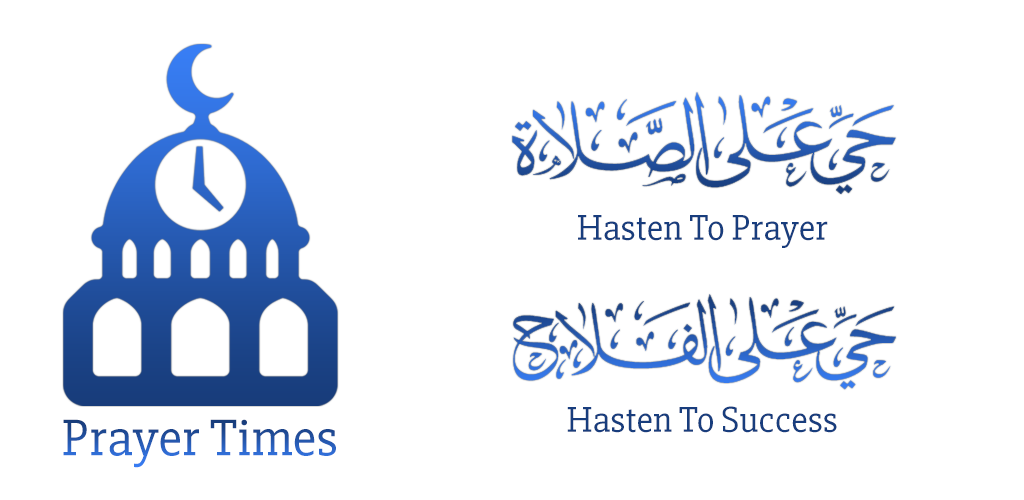
<style>
.page{position:relative;width:1024px;height:500px;background:#ffffff}
.page>*{position:absolute;margin:0}
.t1{font:37px "Slabo27px-Regular";color:#183d7d}
.t2{font:53.3px "Slabo27px-Regular"}
</style>
<div class="page">
<p class="t1" style="left:578px;top:215px;width:250px;height:33px">Hasten To Prayer</p>
<p class="t1" style="left:567px;top:406px;width:270px;height:27px">Hasten To Success</p>
<p class="t2" style="left:63px;top:419px;width:273px;height:49px">Prayer Times</p>
</div>
